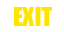
<style>
.page{position:relative;width:64px;height:32px;background:#ffffff}
.page>*{position:absolute;margin:0}
.t1{font:24px "Impact";color:#ffe400}
</style>
<div class="page">
<p class="t1" style="left:14px;top:7px;width:38px;height:19px">EXIT</p>
</div>
